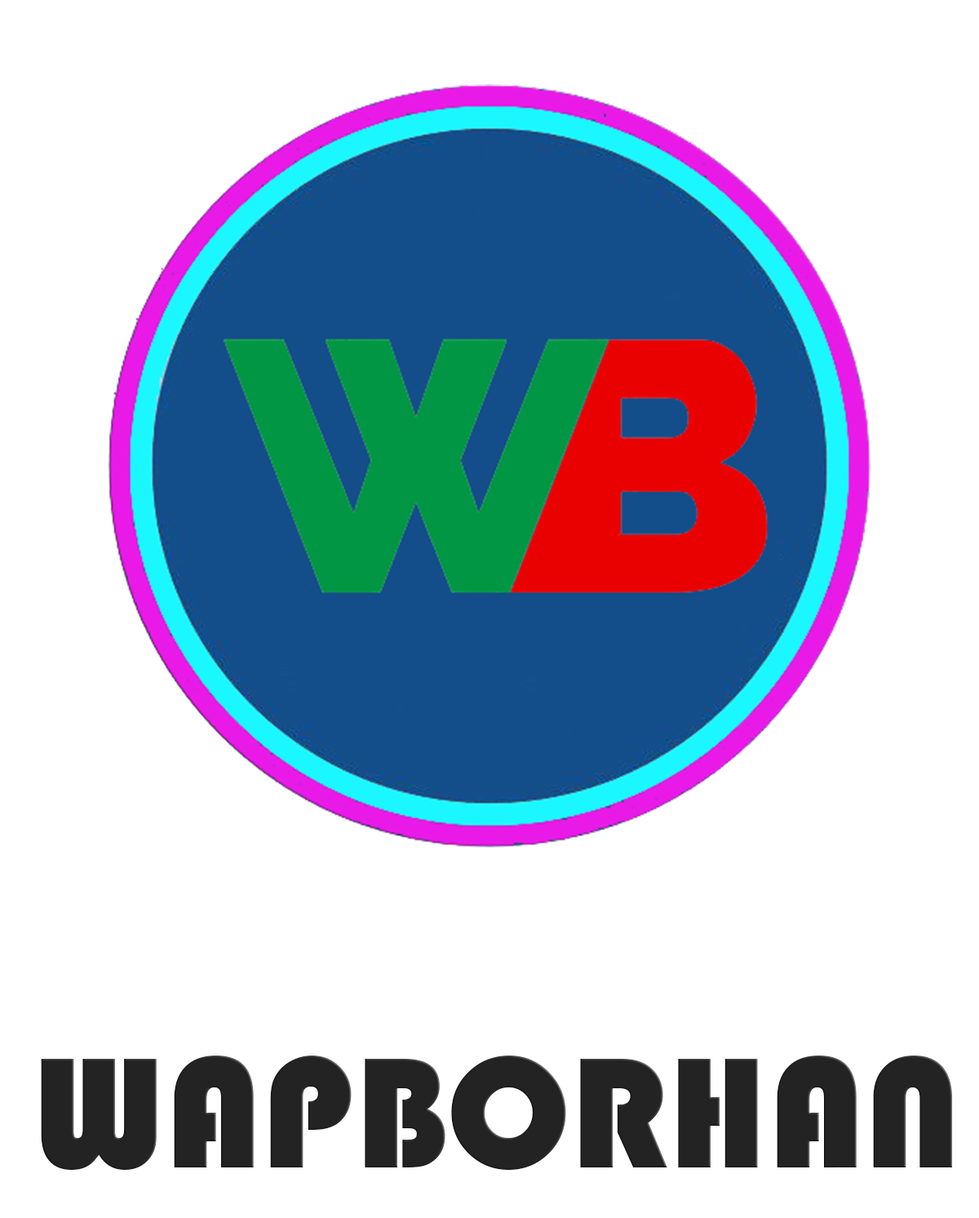
<style>
.page{position:relative;width:979px;height:1218px;background:#ffffff}
.page>*{position:absolute;margin:0}
.t1{font:163.2px "Bauhaus93";color:#232323}
</style>
<div class="page">
<p class="t1" style="left:41px;top:1055px;width:912px;height:114px">WAPBORHAN</p>
</div>
